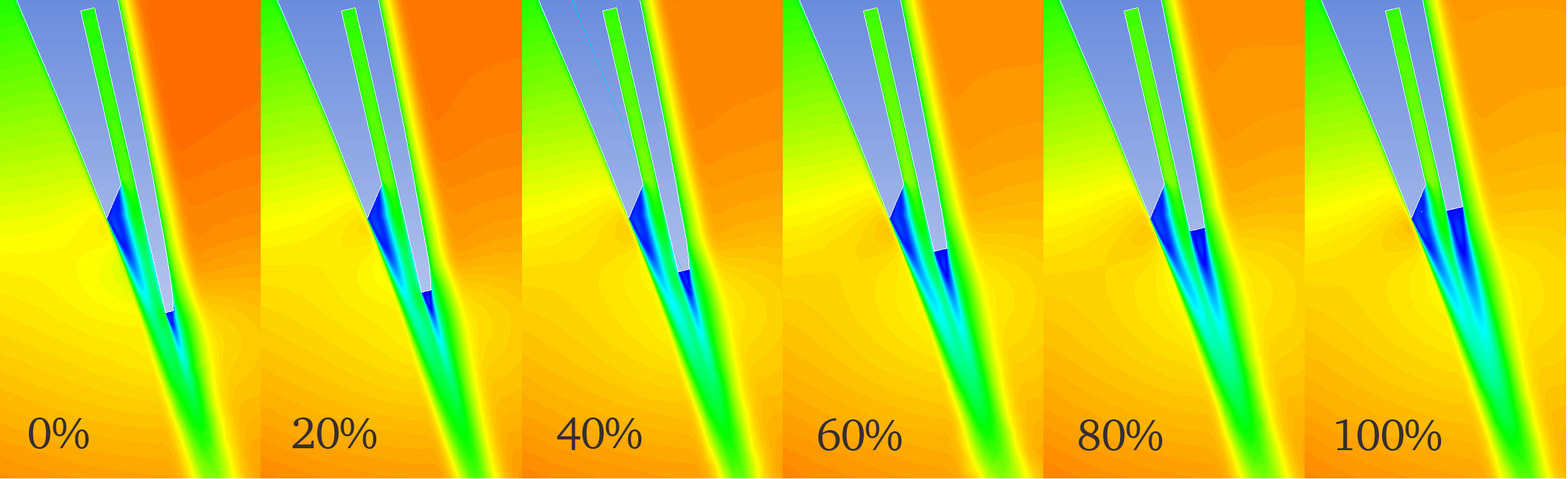
<style>
.page{position:relative;width:1568px;height:479px}
.page>*{position:absolute;margin:0}
.t1{font:45.2px "Charter-Roman";letter-spacing:-0.02em;color:#352e31}
</style>
<div class="page">
<p class="t1" style="left:29px;top:418px;width:60px;height:31px">0%</p>
<p class="t1" style="left:293px;top:418px;width:84px;height:31px">20%</p>
<p class="t1" style="left:557px;top:418px;width:85px;height:32px">40%</p>
<p class="t1" style="left:818px;top:418px;width:84px;height:33px">60%</p>
<p class="t1" style="left:1079px;top:420px;width:84px;height:31px">80%</p>
<p class="t1" style="left:1336px;top:420px;width:106px;height:31px">100%</p>
</div>
